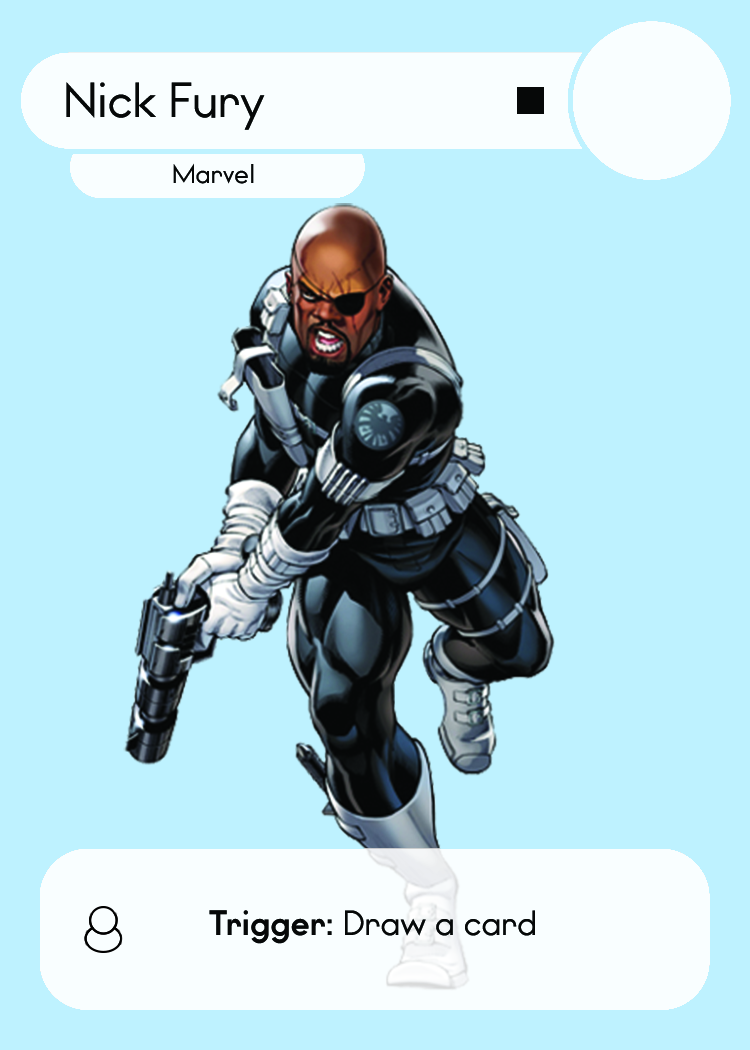
<style>
.page{position:relative;width:750px;height:1050px;background:#bef2ff}
.page>*{position:absolute;margin:0}
.t1{font:46.7px "WatchwordRegularDemo";color:#060808}
.t2{font:25.5px "WatchwordRegularDemo";color:#060808}
.t3{font:33.3px "WatchwordRegularDemo";color:#060808}
.t4{font:33.3px "WatchwordBoldDemo";color:#060808}
</style>
<div class="page">
<p class="t1" style="left:66px;top:82px;width:199px;height:48px">Nick Fury</p>
<p class="t2" style="left:173px;top:163px;width:81px;height:21px">Marvel</p>
<p class="t3" style="left:209px;top:910px;width:326px;height:34px"><span class="t4">Trigger: </span>Draw a card</p>
</div>
